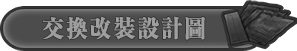
<style>
.page{position:relative;width:297px;height:51px}
.page>*{position:absolute;margin:0}
.t1{font:24px "RyuminPr6N-ExBold";letter-spacing:0.075em;color:#9e9e9e;font-weight:bold;scale:0.9 1}
</style>
<div class="page">
<p class="t1" style="left:43px;top:16px;width:162px;height:24px">交換改裝設計圖</p>
</div>
